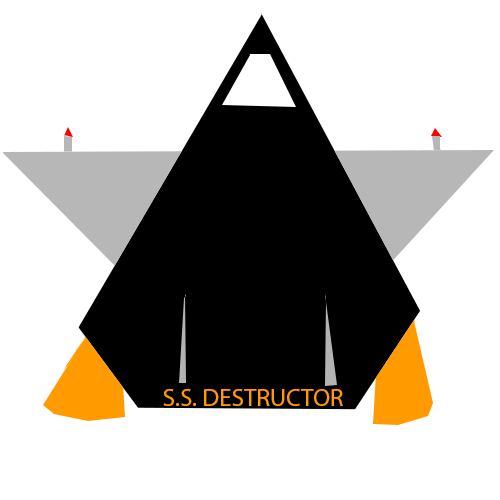
<style>
.page{position:relative;width:500px;height:500px;background:#ffffff}
.page>*{position:absolute;margin:0}
.t1{font:25px "MyriadPro-Regular";color:#ff9c00}
</style>
<div class="page">
<p class="t1" style="left:163px;top:389px;width:180px;height:17px">S.S. DESTRUCTOR</p>
</div>
